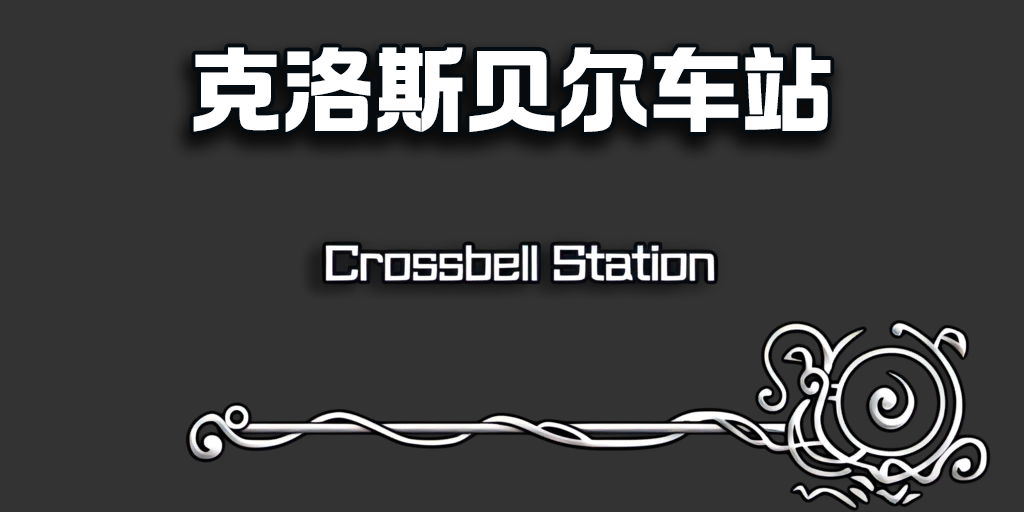
<style>
.page{position:relative;width:1024px;height:512px;background:#333333}
.page>*{position:absolute;margin:0}
.t1{font:92px "HYFengShangHei-95W";color:#ffffff}
</style>
<div class="page">
<p class="t1" style="left:193px;top:47px;width:638px;height:85px">克洛斯贝尔车站</p>
</div>
